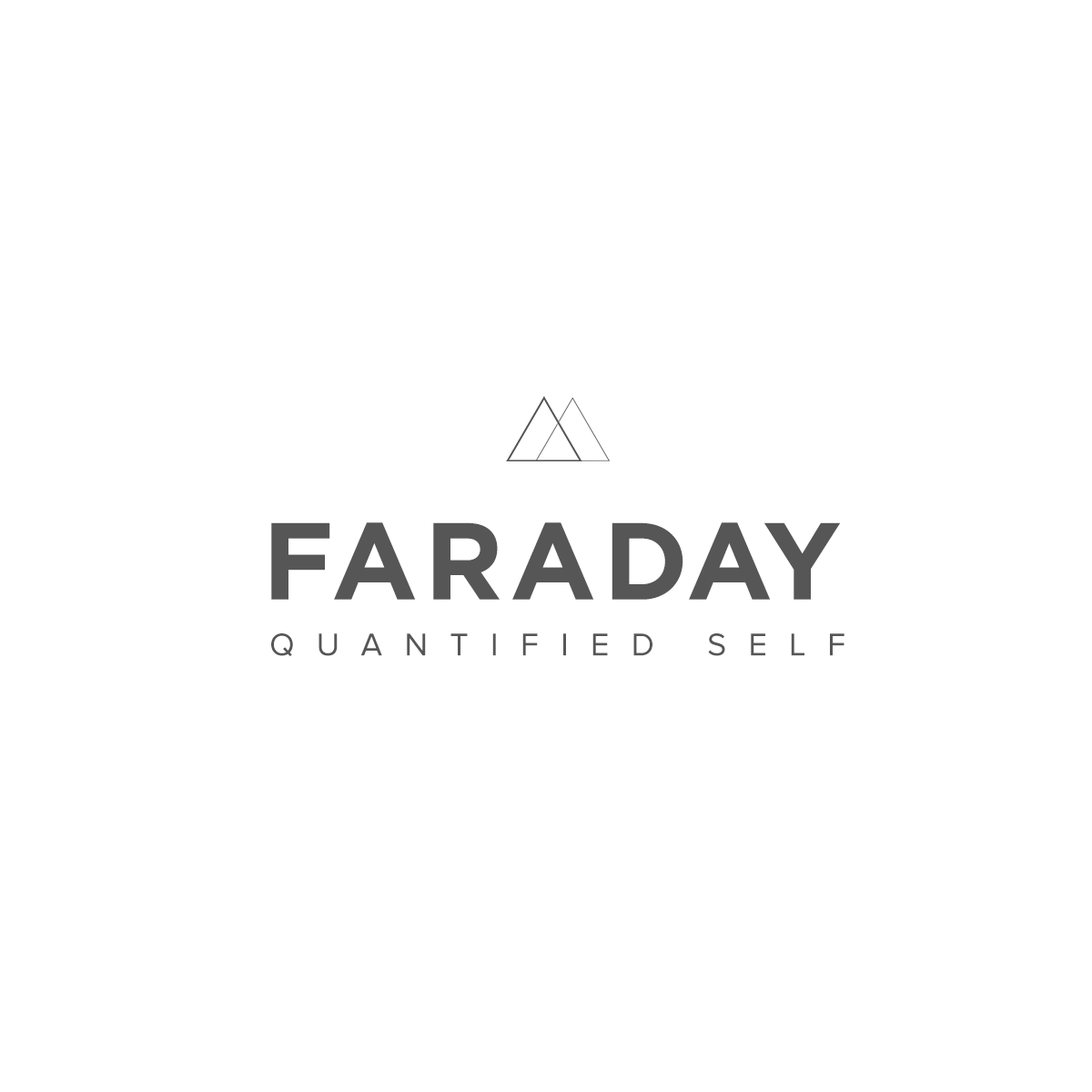
<style>
.page{position:relative;width:1092px;height:1092px;background:#ffffff}
.page>*{position:absolute;margin:0}
.t1{font:109px "GothamBold";letter-spacing:0.06em;color:#565656}
.t2{font:32.8px "ProximaNova-Regular";letter-spacing:0.675em;color:#565656}
</style>
<div class="page">
<p class="t1" style="left:271px;top:522px;width:59px;height:78px">F</p>
<p class="t1" style="left:334px;top:522px;width:82px;height:78px">A</p>
<p class="t1" style="left:433px;top:522px;width:67px;height:78px">R</p>
<p class="t1" style="left:512px;top:522px;width:82px;height:78px">A</p>
<p class="t1" style="left:612px;top:522px;width:71px;height:78px">D</p>
<p class="t1" style="left:689px;top:522px;width:82px;height:78px">A</p>
<p class="t1" style="left:764px;top:522px;width:76px;height:78px">Y</p>
<p class="t2" style="left:271px;top:633px;width:573px;height:24px">QUANTIFIED SELF</p>
</div>
